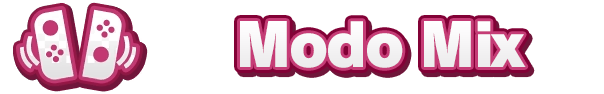
<style>
.page{position:relative;width:604px;height:94px;background:#ffffff}
.page>*{position:absolute;margin:0}
.t1{font:58.7px "RodinNTLGPro-UB";letter-spacing:-0.043em;color:#f5f4f5}
</style>
<div class="page">
<p class="t1" style="left:240px;top:21px;width:286px;height:47px">Modo Mix</p>
</div>
